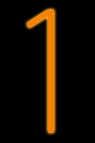
<style>
.page{position:relative;width:95px;height:143px;background:#000000}
.page>*{position:absolute;margin:0}
.t1{font:165px "KozGoPro-ExtraLight";color:#fb8200}
</style>
<div class="page">
<p class="t1" style="left:26px;top:9px;width:28px;height:124px">1</p>
</div>
